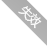
<style>
.page{position:relative;width:47px;height:48px;background:#ffffff}
.page>*{position:absolute;margin:0}
.t1{font:12px "MicrosoftYaHei";color:#ffffff}
</style>
<div class="page">
<p class="t1" style="left:18px;top:6px;width:24px;height:23px;rotate:45deg">失效</p>
</div>
